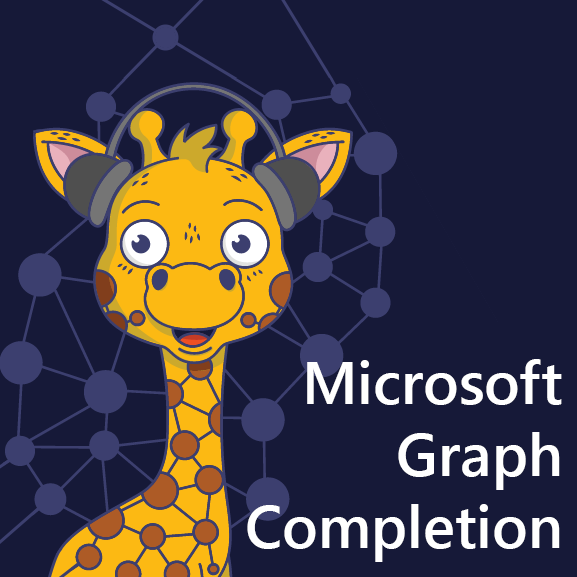
<style>
.page{position:relative;width:577px;height:577px;background:#161938}
.page>*{position:absolute;margin:0}
.t1{font:60px "SegoeUI-Semibold";color:#ffffff}
</style>
<div class="page">
<p class="t1" style="left:247px;top:359px;width:315px;height:203px;text-align:right">Microsoft<br>Graph<br>Completion</p>
</div>
